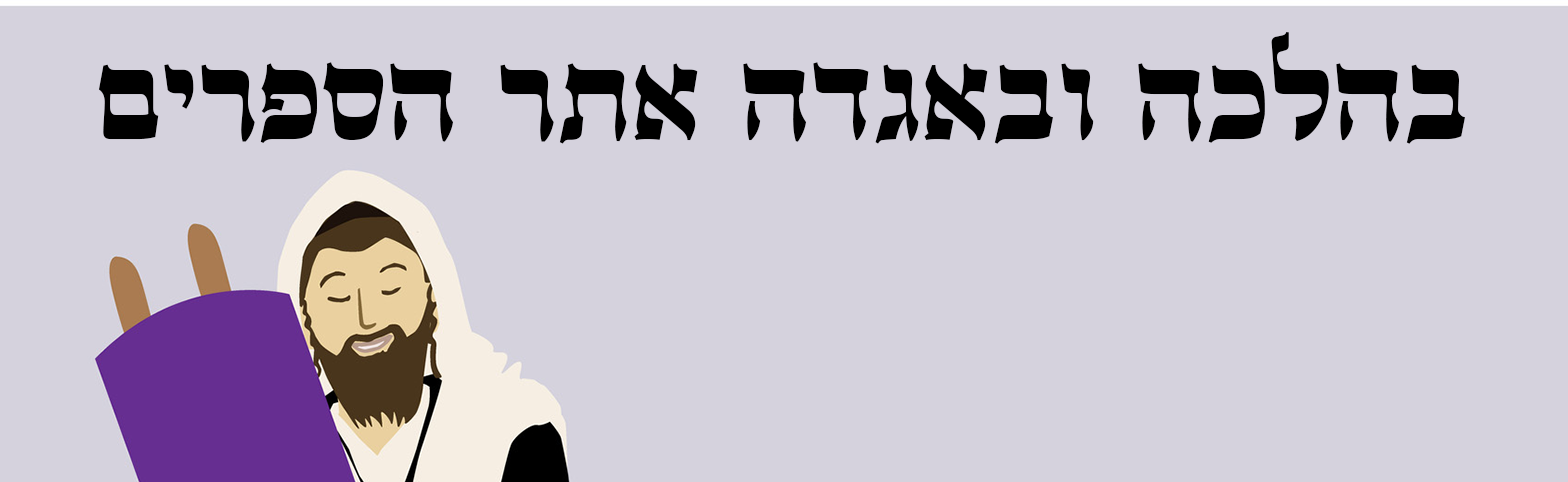
<style>
.page{position:relative;width:1568px;height:482px;background:#d5d2dd}
.page>*{position:absolute;margin:0}
.t1{font:120px "GuttmanMantovaBold";color:#000000}
</style>
<div class="page">
<p class="t1" style="left:98px;top:32px;width:1367px;height:112px">בהלכה ובאגדה אתר הספרים</p>
</div>
